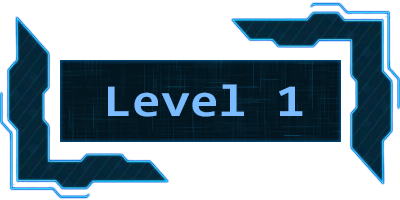
<style>
.page{position:relative;width:400px;height:200px;background:#ffffff}
.page>*{position:absolute;margin:0}
.t1{font:45.7px "Consolas-Bold";color:#7abcff;scale:1.15 1}
</style>
<div class="page">
<p class="t1" style="left:108px;top:84px;width:195px;height:33px">Level 1</p>
</div>
